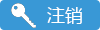
<style>
.page{position:relative;width:100px;height:30px;background:#3998d6}
.page>*{position:absolute;margin:0}
.t1{font:18px "MicrosoftYaHei";color:#ffffff}
</style>
<div class="page">
<p class="t1" style="left:47px;top:7px;width:35px;height:17px">注销</p>
</div>
